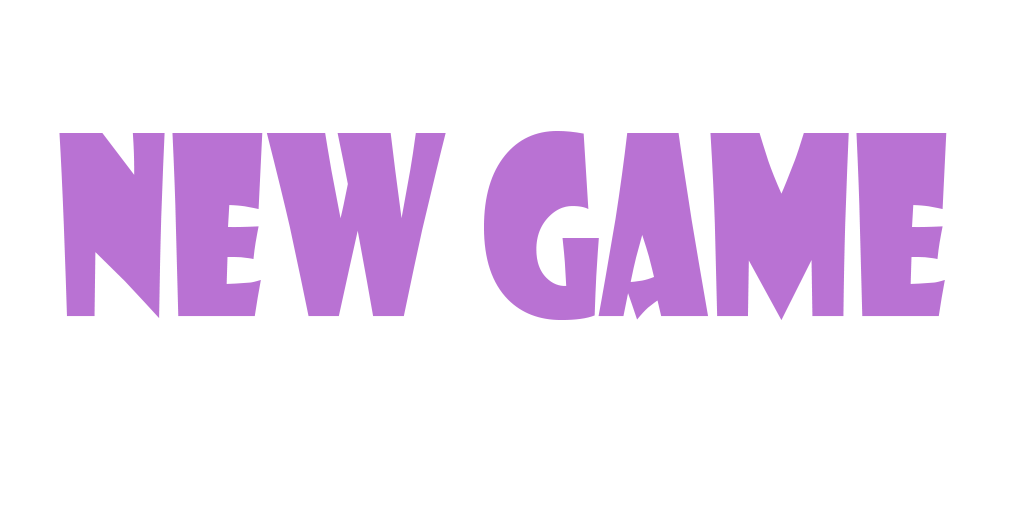
<style>
.page{position:relative;width:1024px;height:512px;background:#ffffff}
.page>*{position:absolute;margin:0}
.t1{font:243.8px "ShowcardGothic-Reg";color:#b972d3;scale:0.72 1}
</style>
<div class="page">
<p class="t1" style="left:59px;top:131px;width:888px;height:189px">new game</p>
</div>
